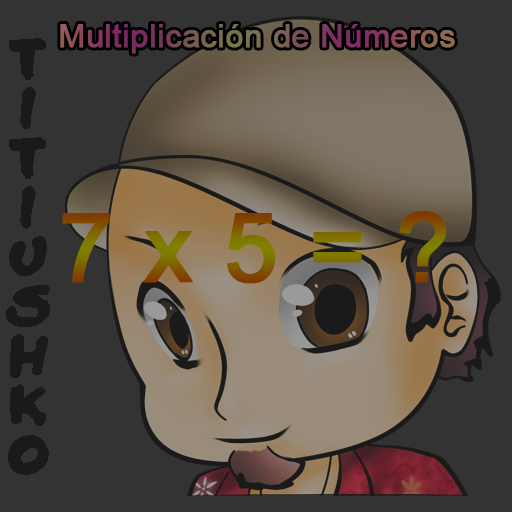
<style>
.page{position:relative;width:512px;height:512px;background:#333333}
.page>*{position:absolute;margin:0}
.t1{font:32.1px "ArialMT";font-weight:bold}
.t2{font:95.5px "ArialMT";font-weight:bold}
</style>
<div class="page">
<p class="t1" style="left:60px;top:24px;width:395px;height:30px">Multiplicación de Números</p>
<p class="t2" style="left:62px;top:211px;width:385px;height:73px">7 x 5 = ?</p>
</div>
